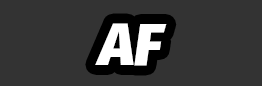
<style>
.page{position:relative;width:262px;height:86px;background:#333333}
.page>*{position:absolute;margin:0}
.t1{font:60px "FiraSans-BlackItalic";color:#ffffff}
</style>
<div class="page">
<p class="t1" style="left:95px;top:23px;width:72px;height:43px">AF</p>
</div>
